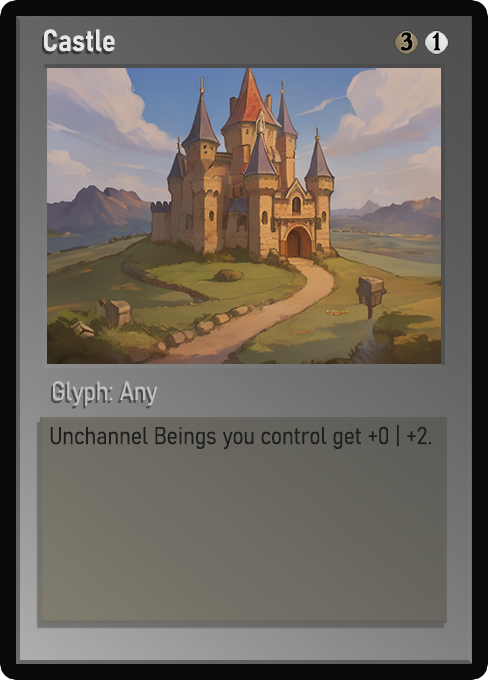
<style>
.page{position:relative;width:488px;height:680px}
.page>*{position:absolute;margin:0}
.t1{font:30px "Bahnschrift-SemiBoldSemiCondensed";color:#f2f2f2;font-weight:bold}
.t2{font:25px "WTRRoycroft";color:#000000;font-weight:bold;scale:1.09 1}
.t3{font:26px "Bahnschrift-LightSemiCondensed";color:#c8c8c8;font-weight:bold}
.t4{font:24px "Bahnschrift-LightSemiCondensed";color:#1e1e1e;font-weight:bold}
</style>
<div class="page">
<p class="t1" style="left:44px;top:29px;width:71px;height:23px;opacity:0.9">Castle</p>
<p class="t2" style="left:400px;top:32px;width:13px;height:19px">3</p>
<p class="t2" style="left:432px;top:32px;width:9px;height:19px">1</p>
<p class="t3" style="left:53px;top:381px;width:105px;height:25px;opacity:0.9">Glyph: Any</p>
<p class="t4" style="left:50px;top:424px;width:381px;height:26px">Unchannel Beings you control get +0 | +2.</p>
</div>
